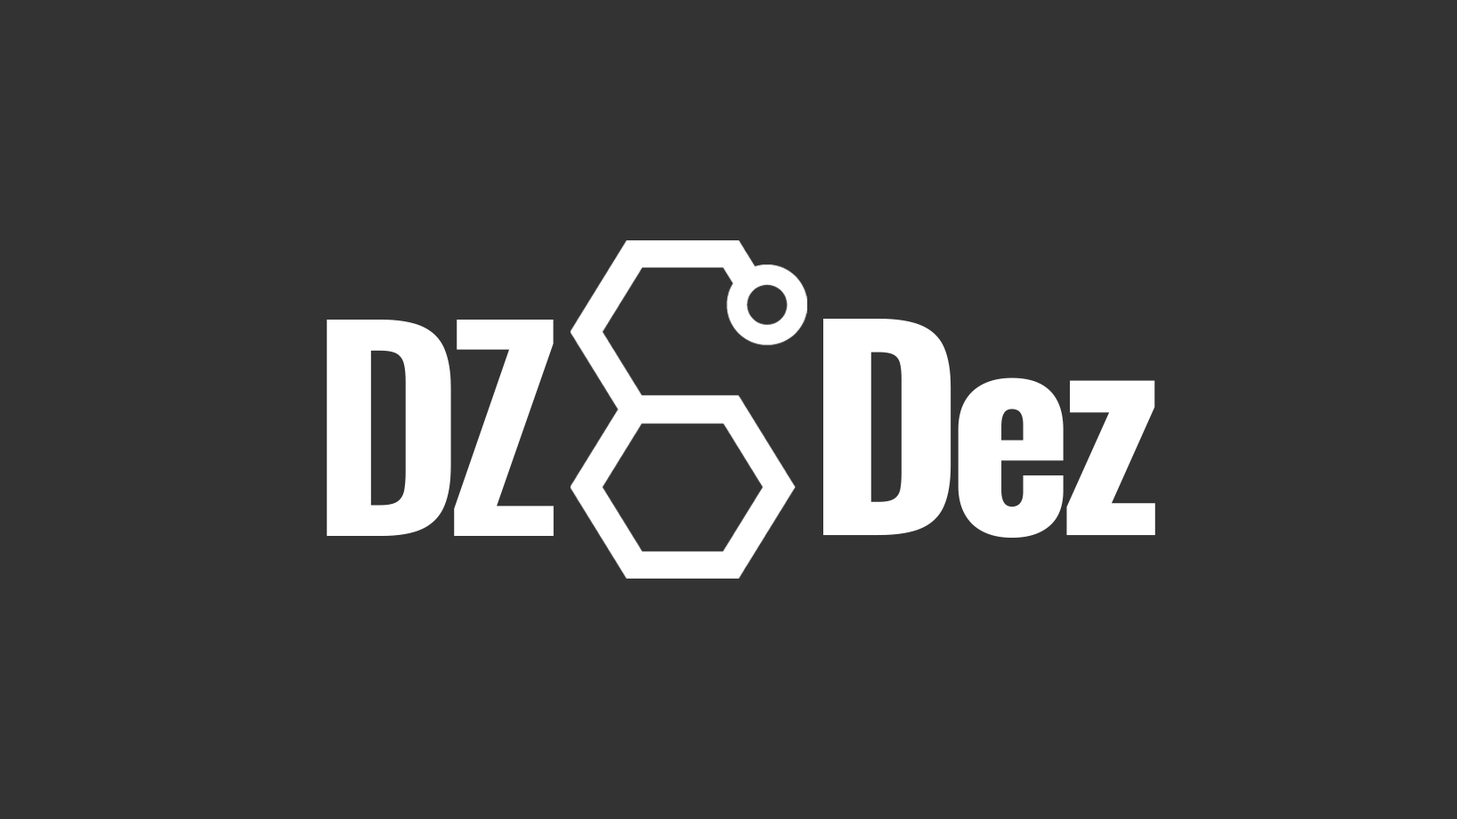
<style>
.page{position:relative;width:1457px;height:819px;background:#333333}
.page>*{position:absolute;margin:0}
.t1{font:266.9px "Oswald-SemiBold";letter-spacing:-0.06em;color:#ffffff;font-weight:bold}
.t2{font:266.9px "Oswald-Bold";letter-spacing:-0.06em;color:#ffffff;font-weight:bold}
</style>
<div class="page">
<p class="t1" style="left:327px;top:319px;width:226px;height:217px">DZ</p>
<p class="t2" style="left:823px;top:319px;width:332px;height:218px">Dez</p>
</div>
